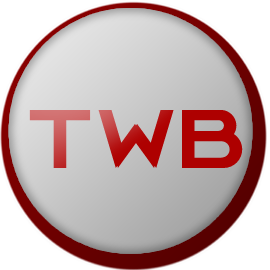
<style>
.page{position:relative;width:270px;height:270px;background:#ffffff}
.page>*{position:absolute;margin:0}
.t1{font:83px "AzonixRegular";color:#ae0000;font-weight:bold}
</style>
<div class="page">
<p class="t1" style="left:29px;top:109px;width:214px;height:60px">TWB</p>
</div>
